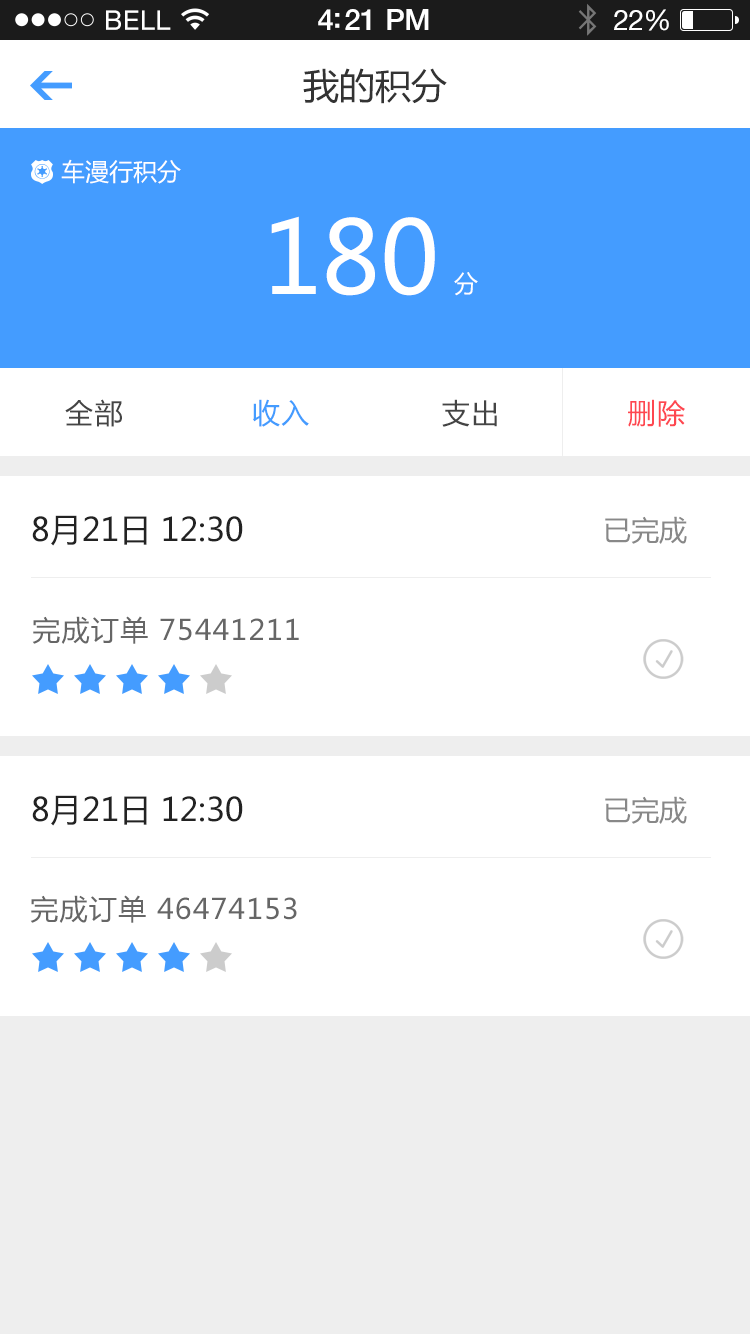
<style>
.page{position:relative;width:750px;height:1334px;background:#ffffff}
.page>*{position:absolute;margin:0}
.t1{font:36px "MicrosoftYaHei";color:#333333}
.t2{font:24px "MicrosoftYaHei";color:#ffffff}
.t3{font:100px "MicrosoftYaHei";color:#ffffff}
.t4{font:28px "MicrosoftYaHei";letter-spacing:0.05em;color:#444444}
.t5{font:28px "MicrosoftYaHei";letter-spacing:0.05em;color:#449cff}
.t6{font:28px "MicrosoftYaHei";letter-spacing:0.05em;color:#fe4750}
.t7{font:32px "MicrosoftYaHei";color:#222222}
.t8{font:28px "MicrosoftYaHei";color:#888888}
.t9{font:28px "MicrosoftYaHei";letter-spacing:0.05em;color:#666666}
</style>
<div class="page">
<p class="t1" style="left:303px;top:68px;width:144px;height:36px">我的积分</p>
<p class="t2" style="left:61px;top:159px;width:120px;height:25px">车漫行积分</p>
<p class="t3" style="left:271px;top:216px;width:164px;height:80px">180</p>
<p class="t2" style="left:454px;top:272px;width:24px;height:24px">分</p>
<p class="t4" style="left:65px;top:399px;width:57px;height:28px">全部</p>
<p class="t5" style="left:253px;top:399px;width:56px;height:28px">收入</p>
<p class="t4" style="left:442px;top:399px;width:55px;height:28px">支出</p>
<p class="t6" style="left:628px;top:399px;width:57px;height:28px">删除</p>
<p class="t7" style="left:32px;top:515px;width:211px;height:31px">8月21日 12:30</p>
<p class="t8" style="left:605px;top:516px;width:82px;height:28px">已完成</p>
<p class="t9" style="left:32px;top:616px;width:267px;height:28px">完成订单 75441211</p>
<p class="t7" style="left:32px;top:795px;width:211px;height:31px">8月21日 12:30</p>
<p class="t8" style="left:605px;top:796px;width:82px;height:28px">已完成</p>
<p class="t9" style="left:30px;top:895px;width:267px;height:28px">完成订单 46474153</p>
</div>
